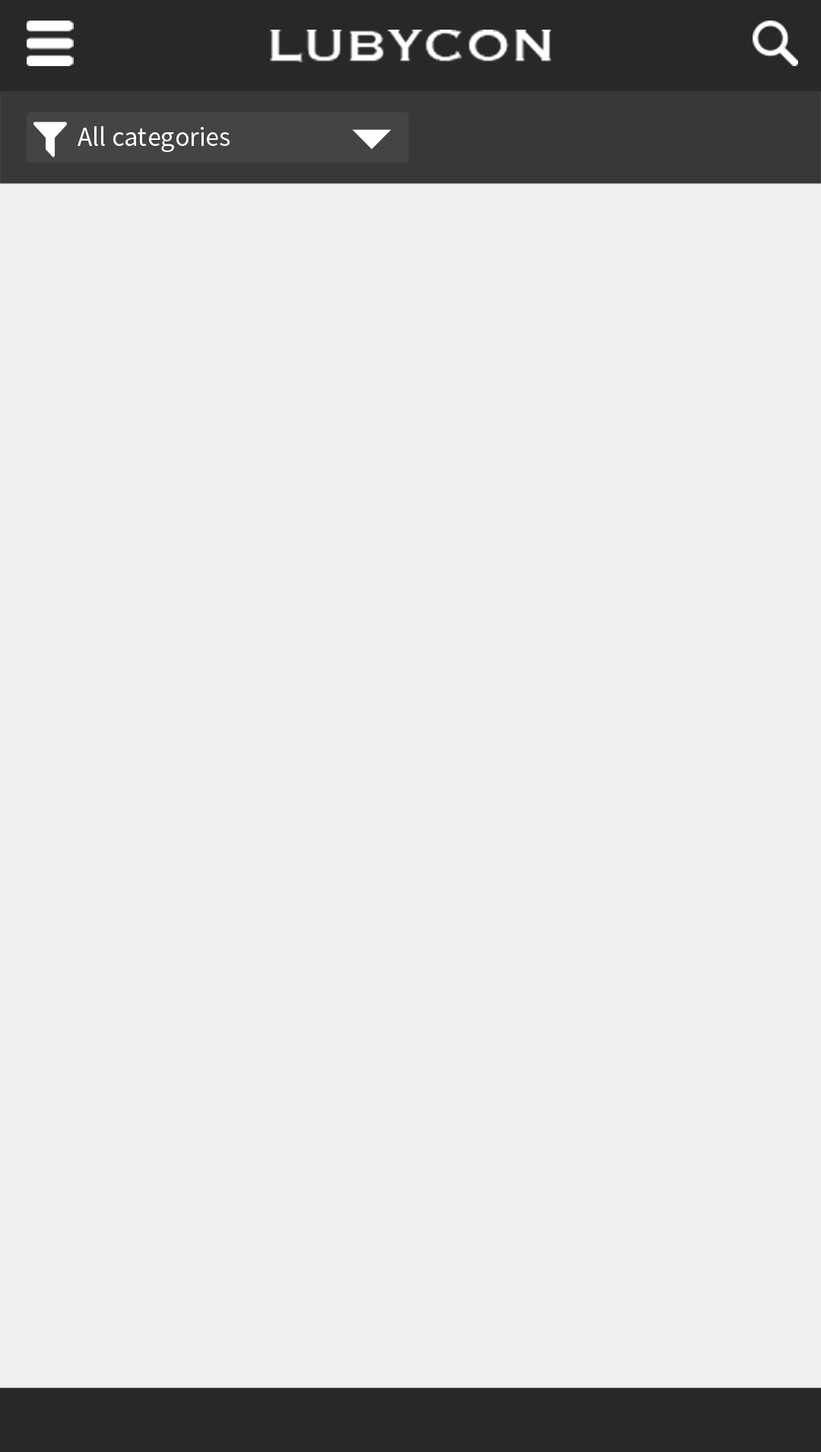
<style>
.page{position:relative;width:821px;height:1452px;background:#f0f0f0}
.page>*{position:absolute;margin:0}
.t1{font:58.7px "Copperplate";color:#ffffff}
.t2{font:27.4px "SourceSansPro-Regular";color:#ffffff}
</style>
<div class="page">
<p class="t1" style="left:270px;top:30px;width:281px;height:32px">LUBYCON</p>
<p class="t2" style="left:78px;top:126px;width:152px;height:26px">All categories</p>
</div>
